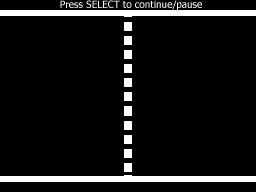
<style>
.page{position:relative;width:256px;height:192px;background:#000000}
.page>*{position:absolute;margin:0}
.t1{font:10px "Tahoma";color:#ffffff}
</style>
<div class="page">
<p class="t1" style="left:60px;top:0px;width:142px;height:10px">Press SELECT to continue/pause</p>
</div>
